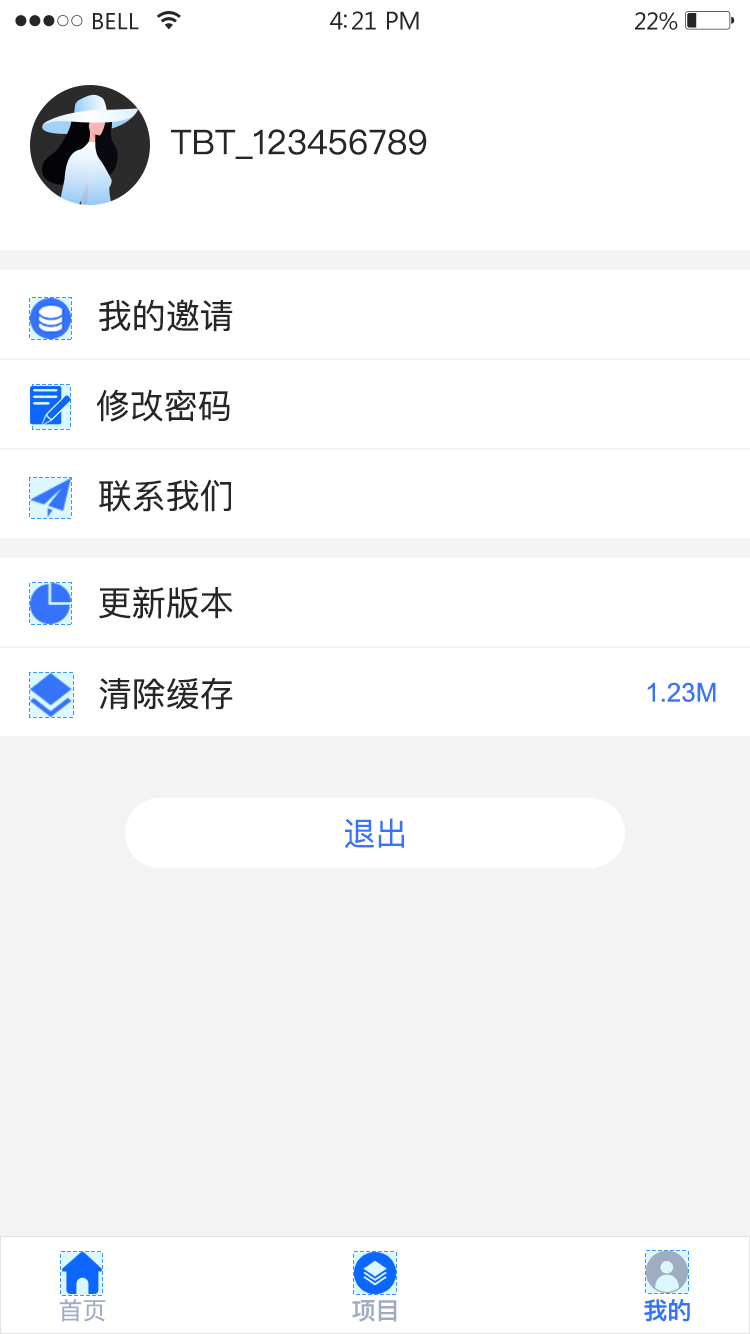
<style>
.page{position:relative;width:750px;height:1334px;background:#ffffff}
.page>*{position:absolute;margin:0}
.t1{font:34px "PingFangSC-Regular";color:#262626}
.t2{font:26px "ArialMT";color:#3574fa}
.t3{font:32px "PingFangSC-Regular";color:#3574fa}
.t4{font:24px "PingFangSC-Regular";color:#a0acc0}
.t5{font:24px "PingFang-SC-Bold";color:#a0acc0}
.t6{font:24px "PingFang-SC-Bold";color:#3574fa}
</style>
<div class="page">
<p class="t1" style="left:171px;top:129px;width:256px;height:30px">TBT_123456789</p>
<p class="t1" style="left:99px;top:299px;width:134px;height:33px">我的邀请</p>
<p class="t1" style="left:96px;top:389px;width:134px;height:33px">修改密码</p>
<p class="t1" style="left:99px;top:479px;width:132px;height:33px">联系我们</p>
<p class="t1" style="left:99px;top:586px;width:134px;height:33px">更新版本</p>
<p class="t1" style="left:99px;top:677px;width:134px;height:33px">清除缓存</p>
<p class="t2" style="left:647px;top:682px;width:69px;height:20px">1.23M</p>
<p class="t3" style="left:345px;top:818px;width:59px;height:31px">退出</p>
<p class="t4" style="left:59px;top:1299px;width:47px;height:23px">首页</p>
<p class="t5" style="left:352px;top:1300px;width:45px;height:22px">项目</p>
<p class="t6" style="left:644px;top:1299px;width:46px;height:23px">我的</p>
</div>
